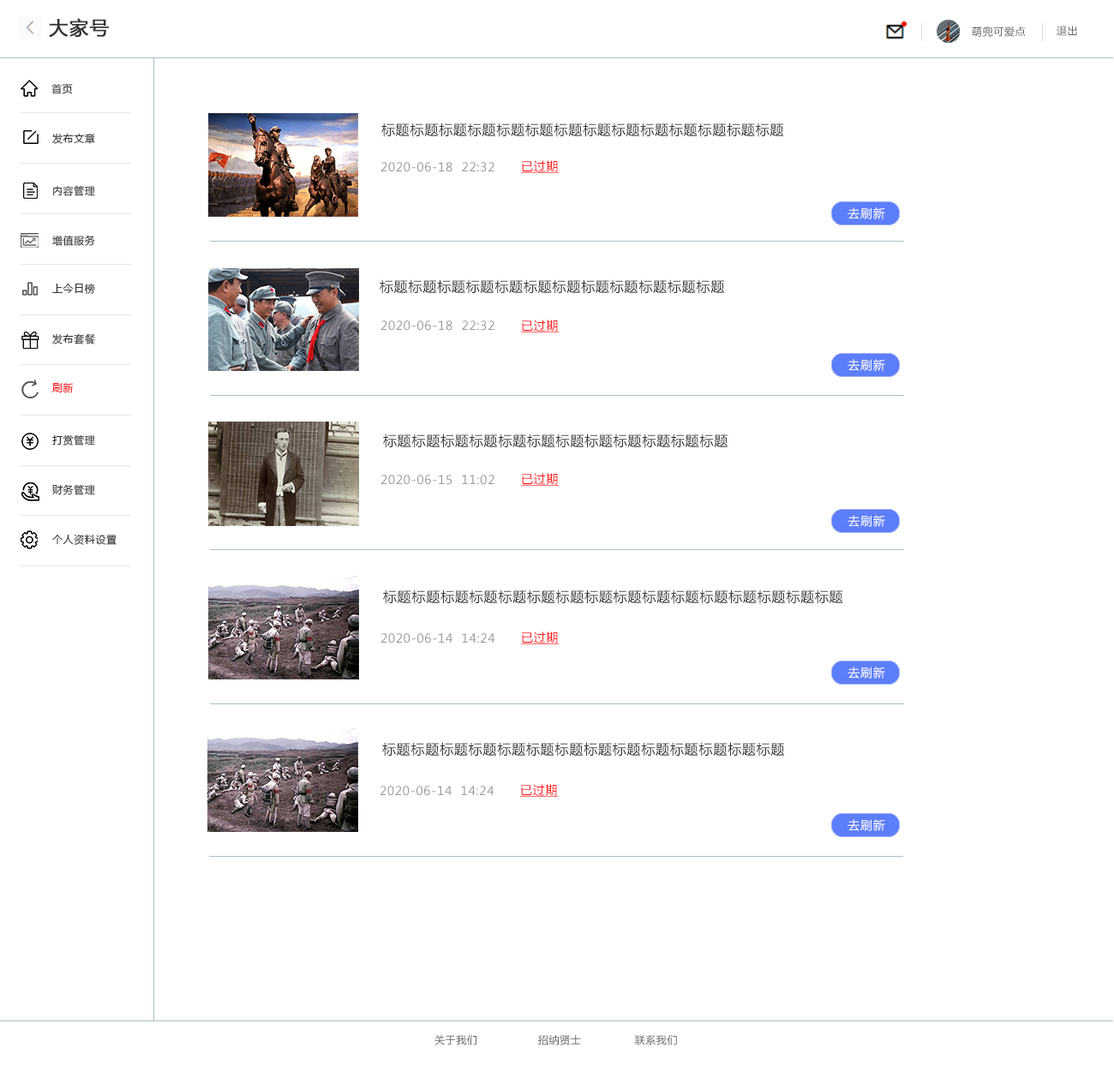
<style>
.page{position:relative;width:1114px;height:1071px;background:#ffffff}
.page>*{position:absolute;margin:0}
.t1{font:18.8px "MicrosoftYaHei";letter-spacing:0.05em;color:#333333;font-weight:bold}
.t2{font:10.3px "MicrosoftYaHei";letter-spacing:0.05em;color:#666666}
.t3{font:10.3px "MicrosoftYaHei";letter-spacing:0.05em;color:#333333}
.t4{font:13.7px "MicrosoftYaHei";letter-spacing:0.05em;color:#333333}
.t5{font:12px "MicrosoftYaHei";letter-spacing:0.05em;color:#999999}
.t6{font:12px "MicrosoftYaHei";letter-spacing:0.05em;color:#ff1a1a;text-decoration:underline}
.t7{font:12px "MicrosoftYaHei";letter-spacing:0.05em;color:#ffffff}
.t8{font:10.3px "MicrosoftYaHei";letter-spacing:0.05em;color:#ff0000}
</style>
<div class="page">
<p class="t1" style="left:49px;top:18px;width:60px;height:20px">大家号</p>
<p class="t2" style="left:971px;top:27px;width:54px;height:10px">萌兜可爱点</p>
<p class="t2" style="left:1056px;top:26px;width:21px;height:10px">退出</p>
<p class="t3" style="left:51px;top:83px;width:22px;height:11px">首页</p>
<p class="t4" style="left:381px;top:122px;width:403px;height:15px">标题标题标题标题标题标题标题标题标题标题标题标题标题标题</p>
<p class="t3" style="left:52px;top:133px;width:43px;height:11px">发布文章</p>
<p class="t5" style="left:380px;top:162px;width:114px;height:10px">2020-06-18  22:32</p>
<p class="t6" style="left:521px;top:160px;width:38px;height:13px">已过期</p>
<p class="t3" style="left:53px;top:185px;width:42px;height:11px">内容管理</p>
<p class="t7" style="left:847px;top:207px;width:38px;height:12px">去刷新</p>
<p class="t3" style="left:52px;top:235px;width:43px;height:11px">增值服务</p>
<p class="t4" style="left:379px;top:279px;width:346px;height:15px">标题标题标题标题标题标题标题标题标题标题标题标题</p>
<p class="t3" style="left:52px;top:283px;width:43px;height:11px">上今日榜</p>
<p class="t5" style="left:380px;top:320px;width:114px;height:11px">2020-06-18  22:32</p>
<p class="t6" style="left:521px;top:320px;width:38px;height:12px">已过期</p>
<p class="t3" style="left:52px;top:333px;width:43px;height:11px">发布套餐</p>
<p class="t7" style="left:847px;top:359px;width:38px;height:12px">去刷新</p>
<p class="t8" style="left:52px;top:383px;width:22px;height:10px">刷新</p>
<p class="t3" style="left:52px;top:434px;width:43px;height:11px">打赏管理</p>
<p class="t4" style="left:383px;top:433px;width:345px;height:15px">标题标题标题标题标题标题标题标题标题标题标题标题</p>
<p class="t6" style="left:521px;top:473px;width:38px;height:13px">已过期</p>
<p class="t3" style="left:52px;top:484px;width:43px;height:11px">财务管理</p>
<p class="t5" style="left:380px;top:475px;width:114px;height:10px">2020-06-15  11:02</p>
<p class="t7" style="left:847px;top:515px;width:38px;height:12px">去刷新</p>
<p class="t3" style="left:52px;top:534px;width:65px;height:11px">个人资料设置</p>
<p class="t4" style="left:383px;top:589px;width:460px;height:15px">标题标题标题标题标题标题标题标题标题标题标题标题标题标题标题标题</p>
<p class="t5" style="left:380px;top:633px;width:114px;height:10px">2020-06-14  14:24</p>
<p class="t6" style="left:521px;top:631px;width:38px;height:13px">已过期</p>
<p class="t7" style="left:847px;top:666px;width:38px;height:12px">去刷新</p>
<p class="t4" style="left:382px;top:742px;width:403px;height:14px">标题标题标题标题标题标题标题标题标题标题标题标题标题标题</p>
<p class="t5" style="left:379px;top:786px;width:114px;height:10px">2020-06-14  14:24</p>
<p class="t6" style="left:520px;top:784px;width:39px;height:13px">已过期</p>
<p class="t7" style="left:847px;top:819px;width:38px;height:12px">去刷新</p>
<p class="t2" style="left:434px;top:1035px;width:243px;height:10px">关于我们                 招纳贤士               联系我们</p>
</div>
